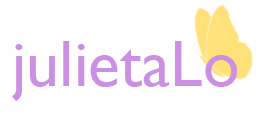
<style>
.page{position:relative;width:269px;height:124px;background:#ffffff}
.page>*{position:absolute;margin:0}
.t1{font:66px "GillSansMT";color:#cb90e3}
</style>
<div class="page">
<p class="t1" style="left:11px;top:41px;width:226px;height:60px">julietaLo</p>
</div>
